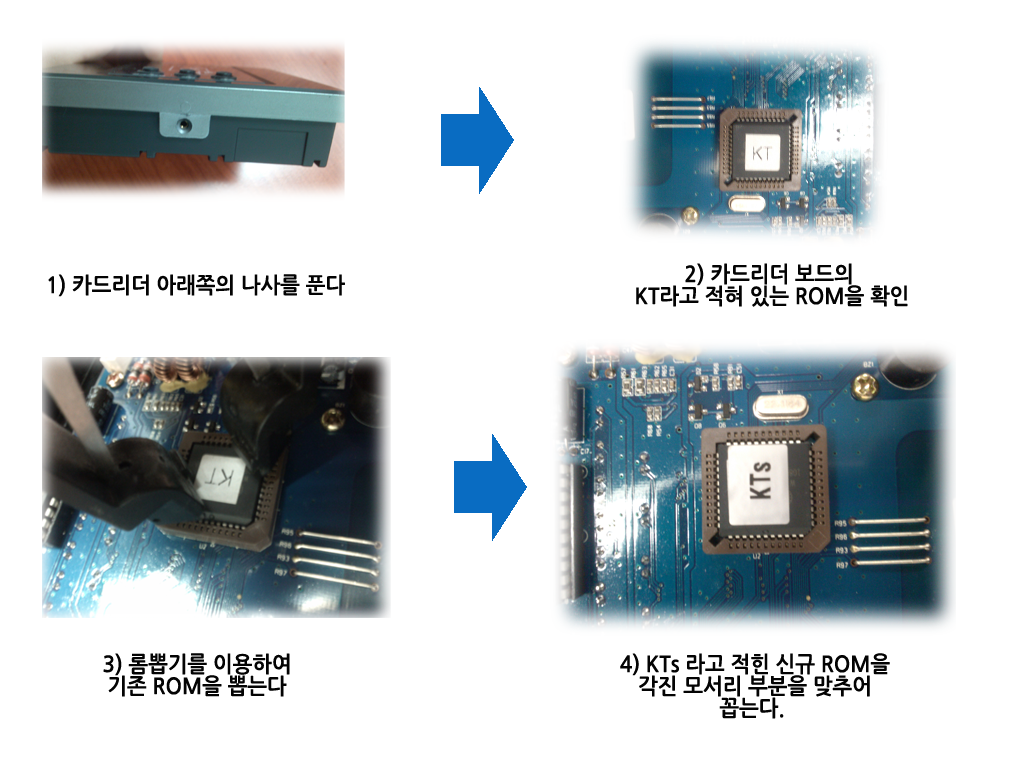
<style>
.page{position:relative;width:1024px;height:768px;background:#ffffff}
.page>*{position:absolute;margin:0}
.t1{font:22px/22px "NanumGothicBold";color:#030303;scale:0.95 1}
.t2{font:22px "NanumGothicBold";color:#030303;scale:0.95 1}
</style>
<div class="page">
<p class="t1" style="left:636px;top:263px;width:272px;height:44px;text-align:center">2) 카드리더 보드의 <br>KT라고 적혀 있는 ROM을 확인</p>
<p class="t2" style="left:48px;top:274px;width:297px;height:23px">1) 카드리더 아래쪽의 나사를 푼다</p>
<p class="t1" style="left:103px;top:653px;width:187px;height:44px;text-align:center">3) 롬뽑기를 이용하여<br>기존 ROM을 뽑는다</p>
<p class="t1" style="left:620px;top:653px;width:270px;height:66px;text-align:center">4) KTs 라고 적힌 신규 ROM을<br>각진 모서리 부분을 맞추어<br>꼽는다.</p>
</div>
